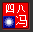
<style>
.page{position:relative;width:33px;height:32px;background:#f20000}
.page>*{position:absolute;margin:0}
.t1{font:10.4px "SimSun";color:#ffffff}
.t2{font:11.7px "SimSun";color:#ffffff}
</style>
<div class="page">
<p class="t1" style="left:6px;top:4px;width:19px;height:9px">四八</p>
<p class="t2" style="left:16px;top:15px;width:11px;height:12px">冯</p>
</div>
